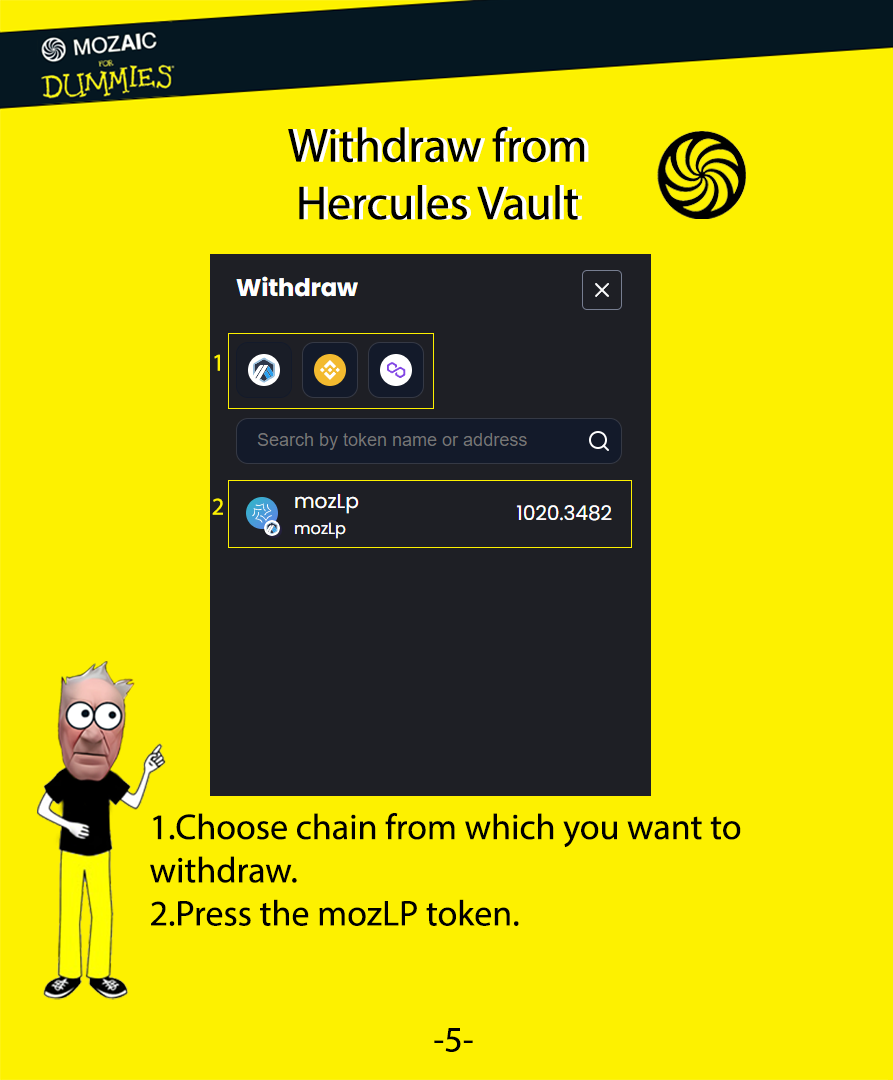
<style>
.page{position:relative;width:893px;height:1080px;background:#fdf100}
.page>*{position:absolute;margin:0}
.t1{font:48px "MyriadPro-Regular";color:#000000}
.t2{font:48px "MyriadPro-Regular";color:#ffffff}
.t3{font:24px "MyriadPro-Regular";color:#fdf100}
.t4{font:36px "MyriadPro-Regular";color:#000000}
</style>
<div class="page">
<p class="t1" style="left:288px;top:126px;width:297px;height:94px;text-align:center">Withdraw from <br>Hercules Vault</p>
<p class="t2" style="left:292px;top:126px;width:297px;height:94px;text-align:center">Withdraw from <br>Hercules Vault</p>
<p class="t3" style="left:214px;top:354px;width:6px;height:17px">1</p>
<p class="t3" style="left:212px;top:498px;width:11px;height:17px">2</p>
<p class="t4" style="left:150px;top:813px;width:591px;height:113px">1.Choose chain from which you want to withdraw.<br>2.Press the mozLP token.</p>
<p class="t4" style="left:434px;top:1028px;width:39px;height:24px;text-align:center">-5-<br>--</p>
</div>
